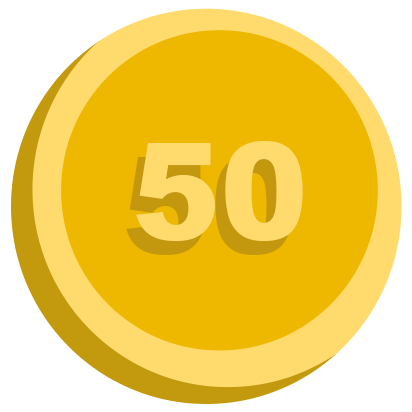
<style>
.page{position:relative;width:412px;height:412px;background:#eeb700}
.page>*{position:absolute;margin:0}
.t1{font:133.5px "Arial-Black";color:#ffda6c}
.t2{font:133.5px "Arial-Black"}
</style>
<div class="page">
<p class="t1" style="left:136px;top:141px;width:167px;height:100px">50</p>
<p class="t2" style="left:126px;top:155px;width:167px;height:100px">50</p>
</div>
